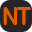
<style>
.page{position:relative;width:32px;height:32px;background:#252525}
.page>*{position:absolute;margin:0}
.t1{font:24.8px "ArialRoundedMTBold";color:#e65a00;scale:0.88 1}
</style>
<div class="page">
<p class="t1" style="left:3px;top:7px;width:14px;height:18px">N</p>
<p class="t1" style="left:17px;top:7px;width:14px;height:18px">T</p>
</div>
